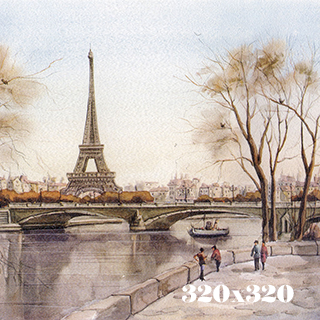
<style>
.page{position:relative;width:320px;height:320px}
.page>*{position:absolute;margin:0}
.t1{font:24px "Salome-Fine";color:#ffffff}
</style>
<div class="page">
<p class="t1" style="left:182px;top:284px;width:112px;height:19px">320x320</p>
</div>
